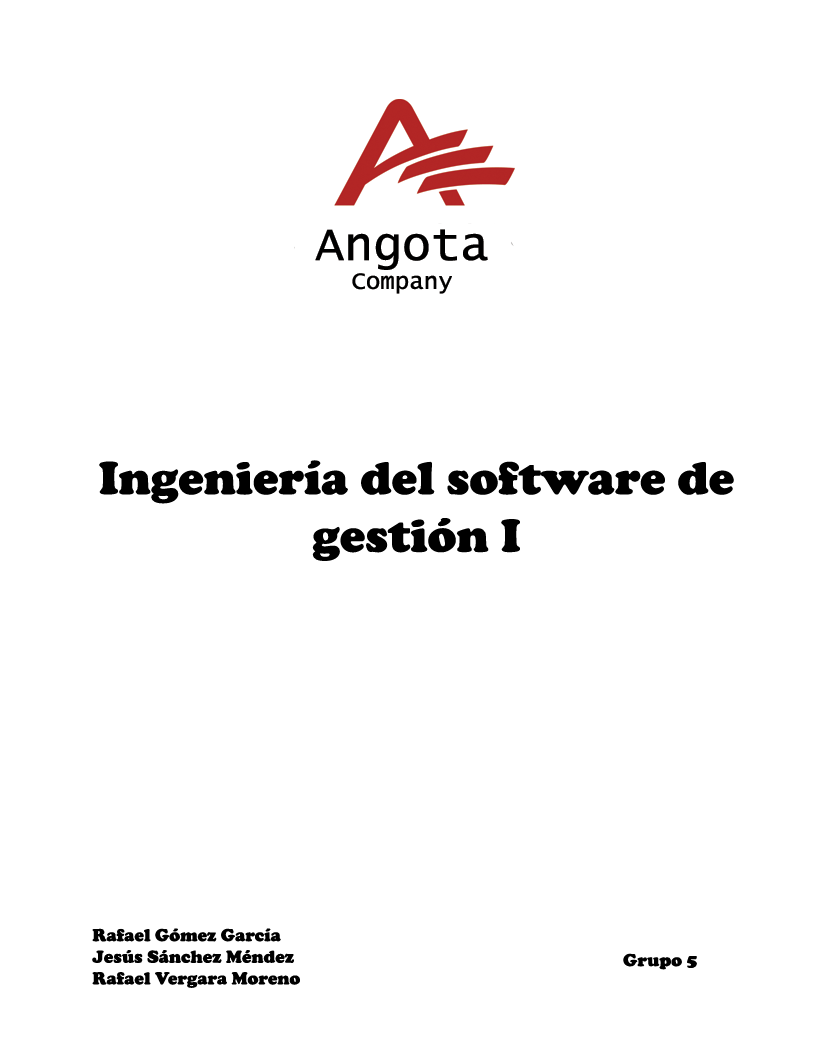
<style>
.page{position:relative;width:816px;height:1056px;background:#ffffff}
.page>*{position:absolute;margin:0}
.t1{font:48px "CooperBlack";color:#000000}
.t2{font:18px "CooperBlack";color:#000000}
</style>
<div class="page">
<p class="t1" style="left:99px;top:460px;width:635px;height:101px;text-align:center">Ingeniería del software de gestión I</p>
<p class="t2" style="left:92px;top:928px;width:208px;height:60px">Rafael Gómez García<br>Jesús Sánchez Méndez<br>Rafael Vergara Moreno</p>
<p class="t2" style="left:623px;top:953px;width:74px;height:17px">Grupo 5</p>
</div>
